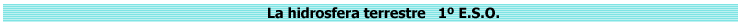
<style>
.page{position:relative;width:742px;height:25px;background:#7fe4e4}
.page>*{position:absolute;margin:0}
.t1{font:14px "Tahoma-Bold";color:#000000}
</style>
<div class="page">
<p class="t1" style="left:268px;top:7px;width:231px;height:12px">La hidrosfera terrestre   1º E.S.O.</p>
</div>
